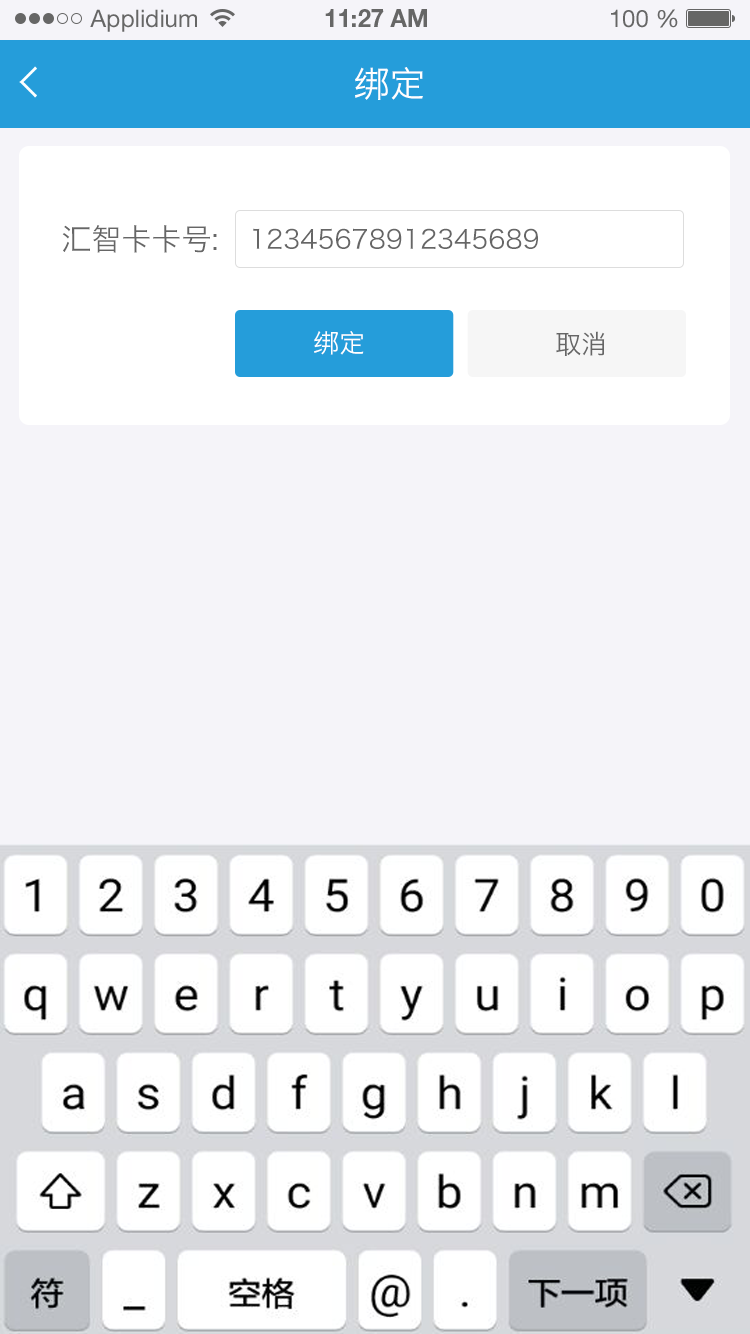
<style>
.page{position:relative;width:750px;height:1334px;background:#f5f4f9}
.page>*{position:absolute;margin:0}
.t1{font:24px "HelveticaNeueLTStd-Roman";color:#666666}
.t2{font:24px "HelveticaNeueLTStd-Bd";color:#666666}
.t3{font:36px "HiraginoSansGB-W3";color:#ffffff;text-transform:uppercase}
.t4{font:30px "HiraginoSansGB-W3";color:#666666;text-transform:uppercase}
.t5{font:26px "HiraginoSansGB-W3";color:#666666;text-transform:uppercase}
.t6{font:26px "HiraginoSansGB-W3";color:#ffffff;text-transform:uppercase}
</style>
<div class="page">
<p class="t1" style="left:90px;top:9px;width:107px;height:23px">Applidium</p>
<p class="t2" style="left:325px;top:9px;width:102px;height:18px">11:27 AM</p>
<p class="t1" style="left:611px;top:9px;width:67px;height:19px">100 %</p>
<p class="t3" style="left:355px;top:67px;width:68px;height:33px">绑定</p>
<p class="t4" style="left:62px;top:225px;width:155px;height:28px">汇智卡卡号:</p>
<p class="t5" style="left:253px;top:228px;width:285px;height:21px">12345678912345689</p>
<p class="t6" style="left:314px;top:331px;width:50px;height:24px">绑定</p>
<p class="t5" style="left:556px;top:331px;width:49px;height:25px">取消</p>
</div>
